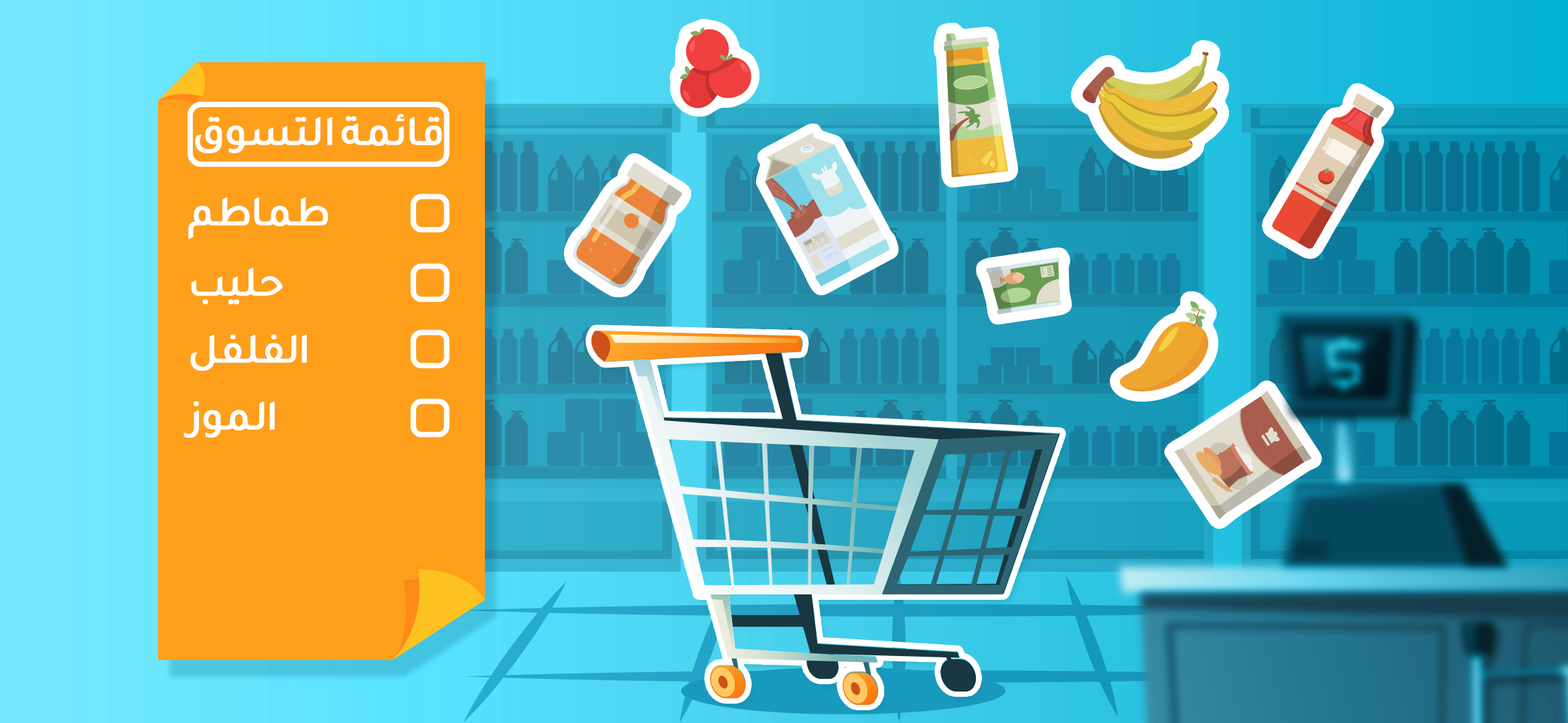
<style>
.page{position:relative;width:1568px;height:723px}
.page>*{position:absolute;margin:0}
.t1{font:42.6px "BoutrosMBCDinkum-Medium";letter-spacing:-0.02em;color:#ffffff;font-weight:bold}
</style>
<div class="page">
<p class="t1" style="left:195px;top:114px;width:247px;height:39px">قائمة التسوق</p>
<p class="t1" style="left:188px;top:198px;width:140px;height:41px">طماطم</p>
<p class="t1" style="left:191px;top:268px;width:92px;height:37px">حليب</p>
<p class="t1" style="left:190px;top:334px;width:117px;height:37px">الفلفل</p>
<p class="t1" style="left:184px;top:401px;width:91px;height:37px">الموز</p>
</div>
